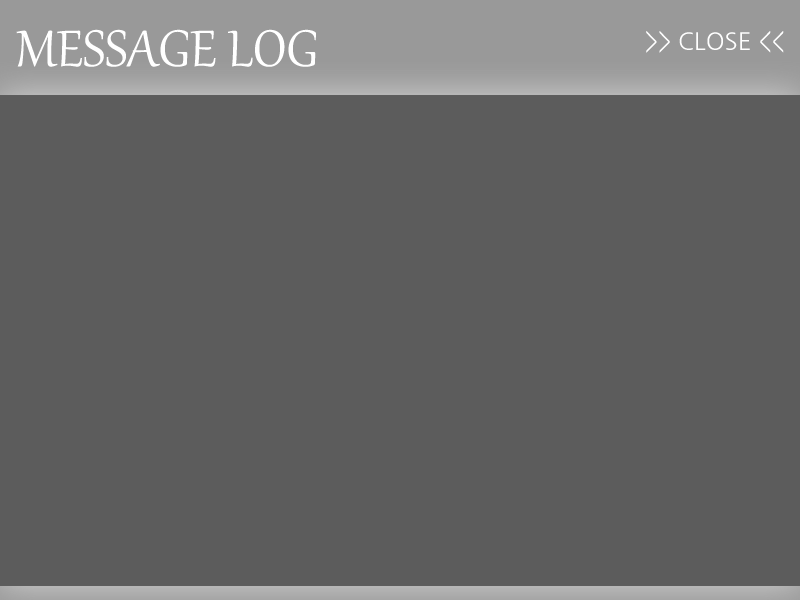
<style>
.page{position:relative;width:800px;height:600px;background:#5c5c5c}
.page>*{position:absolute;margin:0}
.t1{font:63px "Gabriola";color:#ffffff}
.t2{font:24px "NanumGothic";color:#ffffff}
</style>
<div class="page">
<p class="t1" style="left:16px;top:29px;width:300px;height:38px">MESSAGE LOG</p>
<p class="t2" style="left:646px;top:31px;width:138px;height:22px">&gt;&gt; CLOSE &lt;&lt;</p>
</div>
